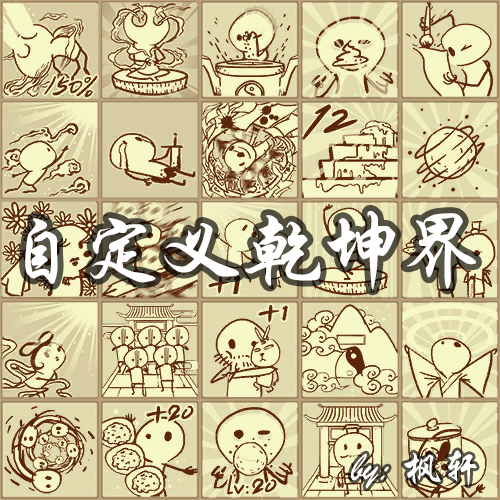
<style>
.page{position:relative;width:500px;height:500px}
.page>*{position:absolute;margin:0}
.t1{font:80px "STXingkai";color:#ffffff}
.t2{font:40px "STXingkai";color:#ffffff}
</style>
<div class="page">
<p class="t1" style="left:25px;top:211px;width:451px;height:79px">自定义乾坤界</p>
<p class="t2" style="left:351px;top:450px;width:126px;height:39px">by: 枫轩</p>
</div>
